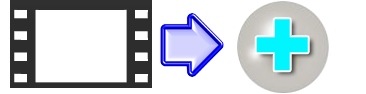
<style>
.page{position:relative;width:366px;height:94px;background:#ffffff}
.page>*{position:absolute;margin:0}
.t1{font:95.6px "Arial-Black";color:#00f5ff}
</style>
<div class="page">
<p class="t1" style="left:256px;top:19px;width:52px;height:52px">+</p>
</div>
